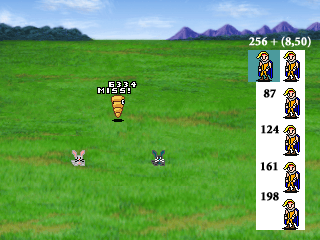
<style>
.page{position:relative;width:320px;height:240px}
.page>*{position:absolute;margin:0}
.t1{font:12px "Minion-Bold";color:#ffffff;font-weight:bold}
.t2{font:12px "Minion-Bold";color:#000000;font-weight:bold}
</style>
<div class="page">
<p class="t1" style="left:249px;top:36px;width:62px;height:12px">256 + (8,50)</p>
<p class="t2" style="left:263px;top:89px;width:13px;height:9px">87</p>
<p class="t2" style="left:261px;top:125px;width:18px;height:9px">124</p>
<p class="t2" style="left:260px;top:162px;width:18px;height:9px">161</p>
<p class="t2" style="left:261px;top:192px;width:18px;height:9px">198</p>
</div>
